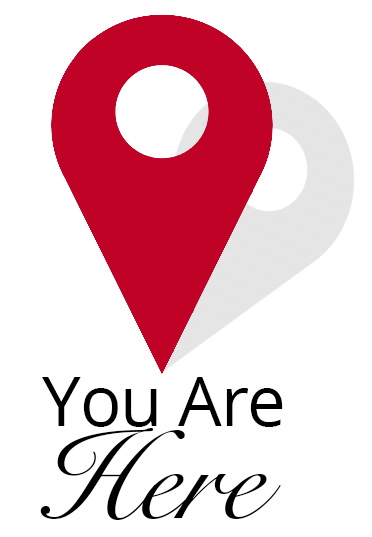
<style>
.page{position:relative;width:372px;height:537px;background:#ffffff}
.page>*{position:absolute;margin:0}
.t1{font:69.4px "OpenSans";letter-spacing:-0.02em;color:#000000}
.t2{font:125px "SnellRoundhand";color:#000000}
</style>
<div class="page">
<p class="t1" style="left:42px;top:377px;width:241px;height:50px">You Are</p>
<p class="t2" style="left:40px;top:428px;width:241px;height:92px">Here</p>
</div>
